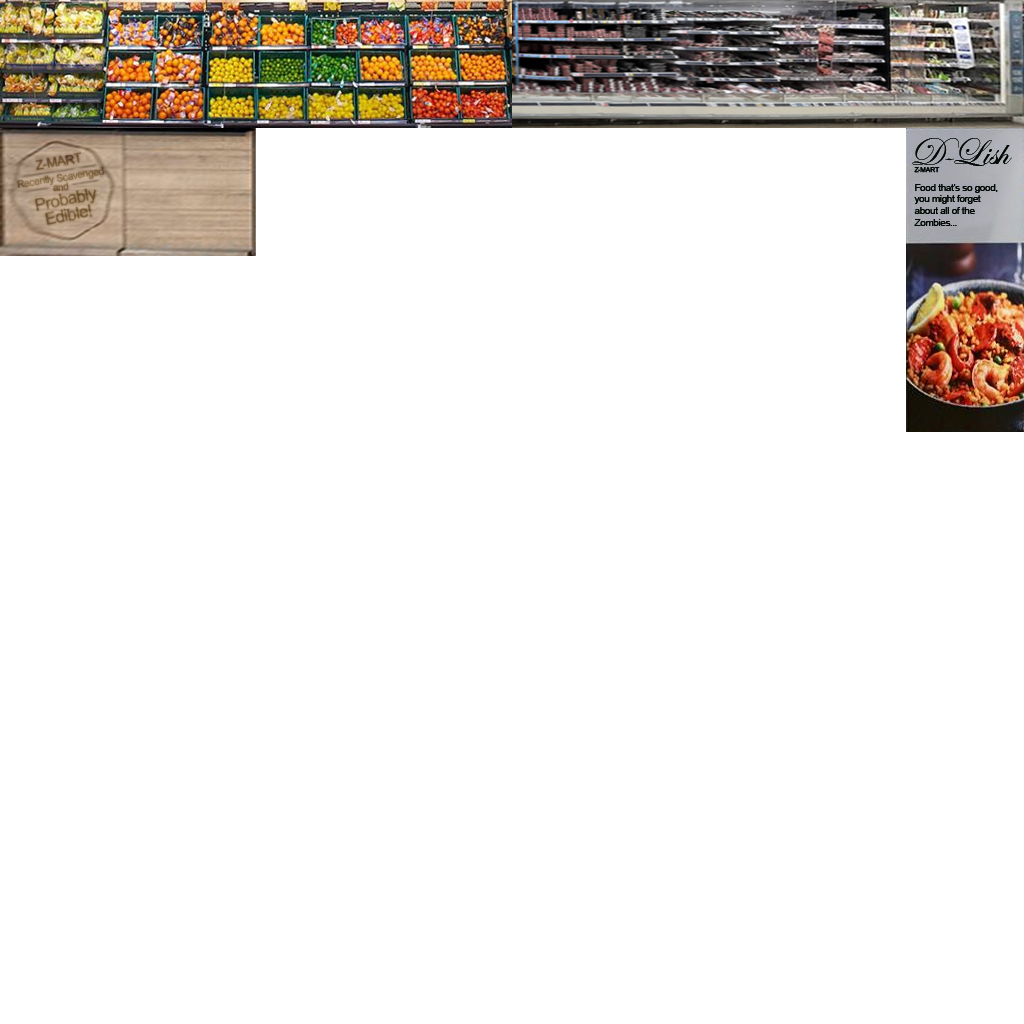
<style>
.page{position:relative;width:1024px;height:1024px;background:#ffffff}
.page>*{position:absolute;margin:0}
.t1{font:39px "EdwardianScriptITC";letter-spacing:-0.02em;color:#010905}
.t2{font:39px "EdwardianScriptITC";letter-spacing:-0.18em;color:#010905}
.t3{font:39px "EdwardianScriptITC";letter-spacing:-0.08em;color:#010905}
.t4{font:6.7px "ArialMT";letter-spacing:-0.02em;color:#010905}
.t5{font:9.8px "ArialMT";letter-spacing:-0.02em;color:#010905}
</style>
<div class="page">
<p class="t1" style="left:912px;top:138px;width:100px;height:28px"><span class="t2">D</span><span class="t3">-</span>Lish</p>
<p class="t4" style="left:914px;top:167px;width:26px;height:6px">Z-MART</p>
<p class="t5" style="left:914px;top:184px;width:84px;height:42px">Food that’s so good,<br>you might forget<br>about all of the<br>Zombies...</p>
</div>
